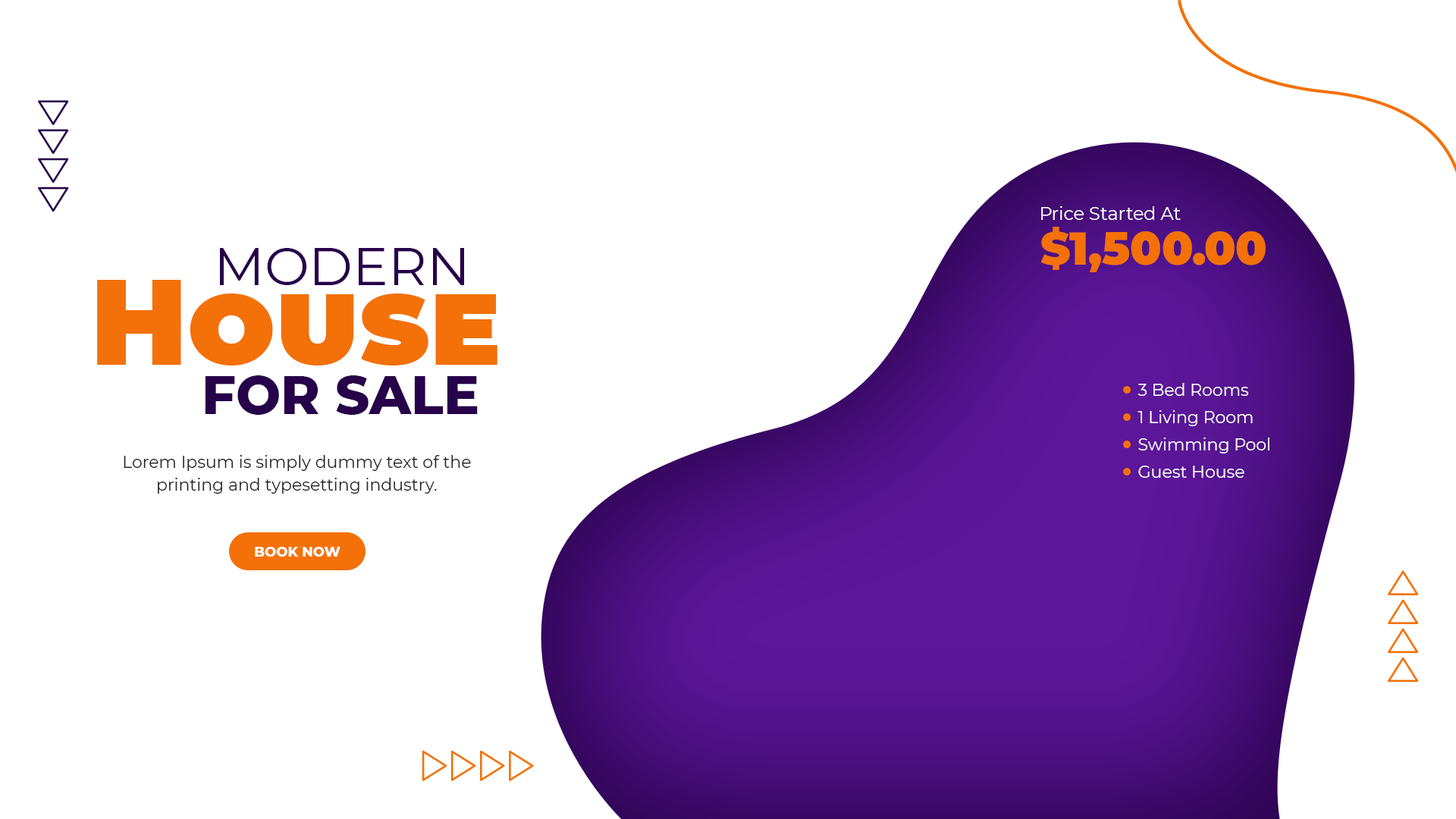
<style>
.page{position:relative;width:1456px;height:819px;background:#ffffff}
.page>*{position:absolute;margin:0}
.t1{font:18.2px "Montserrat-Regular";color:#ffffff}
.t2{font:45.5px "Montserrat-Black";color:#f37108}
.t3{font:53.1px "Montserrat-Regular";color:#270149;text-transform:uppercase}
.t4{font:121.3px "Montserrat-Black";color:#f37108;font-variant:small-caps}
.t5{font:53.1px "Montserrat-ExtraBold";color:#270149;text-transform:uppercase}
.t6{font:16.7px/27.3px "Montserrat-Regular";color:#ffffff}
.t7{font:16.7px/22.7px "Montserrat-Regular";color:#222222}
.t8{font:13.6px "Montserrat-ExtraBold";color:#ffffff;text-transform:uppercase}
</style>
<div class="page">
<p class="t1" style="left:1041px;top:206px;width:140px;height:14px">Price Started At</p>
<p class="t2" style="left:1040px;top:227px;width:226px;height:45px">$1,500.00</p>
<p class="t3" style="left:220px;top:248px;width:244px;height:37px">Modern</p>
<p class="t4" style="left:97px;top:280px;width:400px;height:86px">House</p>
<p class="t5" style="left:205px;top:375px;width:273px;height:40px">For Sale</p>
<p class="t6" style="left:1137px;top:383px;width:132px;height:95px">3 Bed Rooms<br>1 Living Room<br>Swimming Pool<br>Guest House</p>
<p class="t7" style="left:124px;top:455px;width:347px;height:39px;text-align:center">Lorem Ipsum is simply dummy text of the printing and typesetting industry.</p>
<p class="t8" style="left:255px;top:547px;width:85px;height:10px">Book Now</p>
</div>
